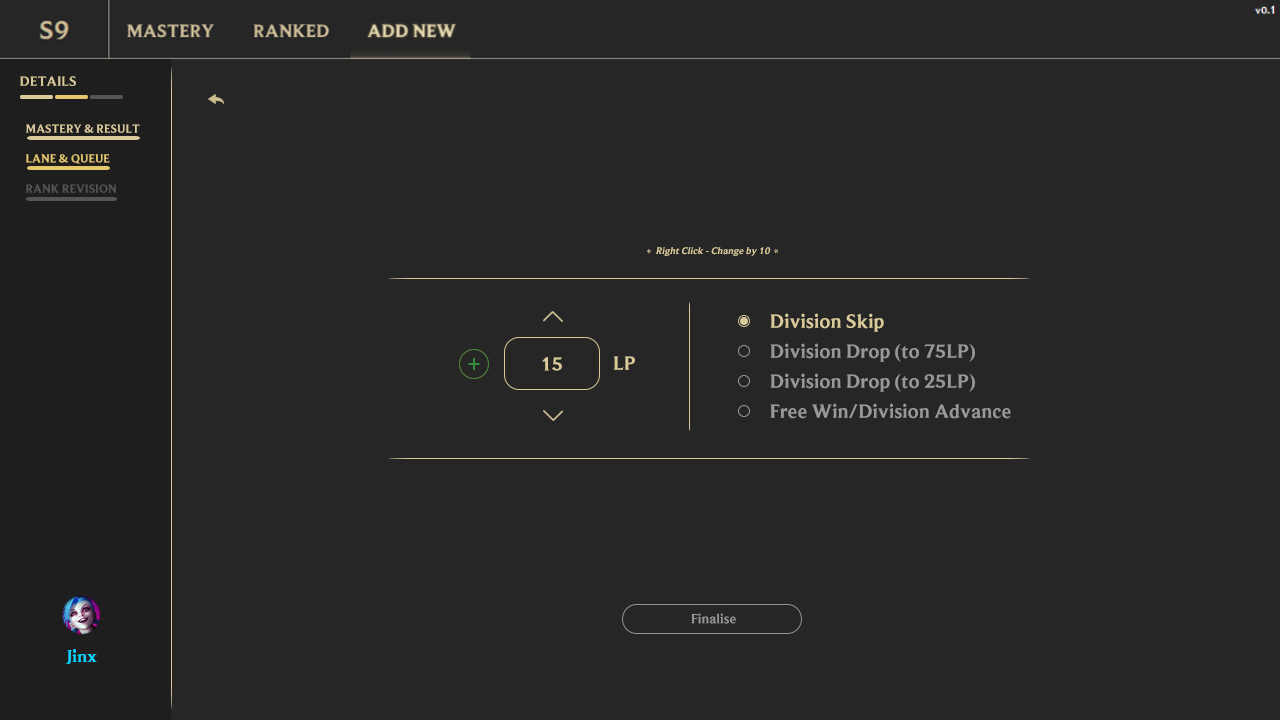
<style>
.page{position:relative;width:1280px;height:720px;background:#262627}
.page>*{position:absolute;margin:0}
.t1{font:14px "BeaufortforLOL-Bold";color:#daca9a}
.t2{font:12px "BeaufortforLOL-Bold";color:#daca9a}
.t3{font:12px "BeaufortforLOL-Bold";color:#e4c66c}
.t4{font:12px "BeaufortforLOL-Bold";color:#555554}
.t5{font:10px "BeaufortforLOL-Bold"}
.t6{font:10px "BeaufortforLOL-Bold";color:#daca9a;font-style:italic}
.t7{font:20px "BeaufortforLOL-Bold";color:#daca9a}
.t8{font:20px "BeaufortforLOL-Bold";color:#989898}
.t9{font:21.5px "BeaufortforLOL-Bold";color:#368a3a;scale:0.95 1}
.t10{font:14px "BeaufortforLOL-Bold";color:#959595}
.t11{font:18px "BeaufortforLOL-Bold";color:#00d2ff}
</style>
<div class="page">
<p class="t1" style="left:20px;top:76px;width:56px;height:10px">DETAILS</p>
<p class="t2" style="left:26px;top:124px;width:114px;height:9px">MASTERY &amp; RESULT</p>
<p class="t3" style="left:26px;top:154px;width:84px;height:10px">LANE &amp; QUEUE</p>
<p class="t4" style="left:26px;top:184px;width:90px;height:9px">RANK REVISION</p>
<p class="t5" style="left:647px;top:249px;width:4px;height:5px">*</p>
<p class="t6" style="left:656px;top:247px;width:115px;height:9px">Right Click - Change by 10</p>
<p class="t5" style="left:774px;top:249px;width:4px;height:5px">*</p>
<p class="t7" style="left:770px;top:313px;width:114px;height:19px">Division Skip</p>
<p class="t8" style="left:770px;top:343px;width:205px;height:19px">Division Drop (to 75LP)</p>
<p class="t9" style="left:468px;top:358px;width:12px;height:12px">+</p>
<p class="t7" style="left:542px;top:357px;width:20px;height:14px">15</p>
<p class="t7" style="left:614px;top:356px;width:21px;height:14px">LP</p>
<p class="t8" style="left:770px;top:373px;width:205px;height:19px">Division Drop (to 25LP)</p>
<p class="t8" style="left:770px;top:403px;width:241px;height:16px">Free Win/Division Advance</p>
<p class="t10" style="left:691px;top:613px;width:45px;height:11px">Finalise</p>
<p class="t11" style="left:66px;top:649px;width:31px;height:15px">Jinx</p>
</div>
